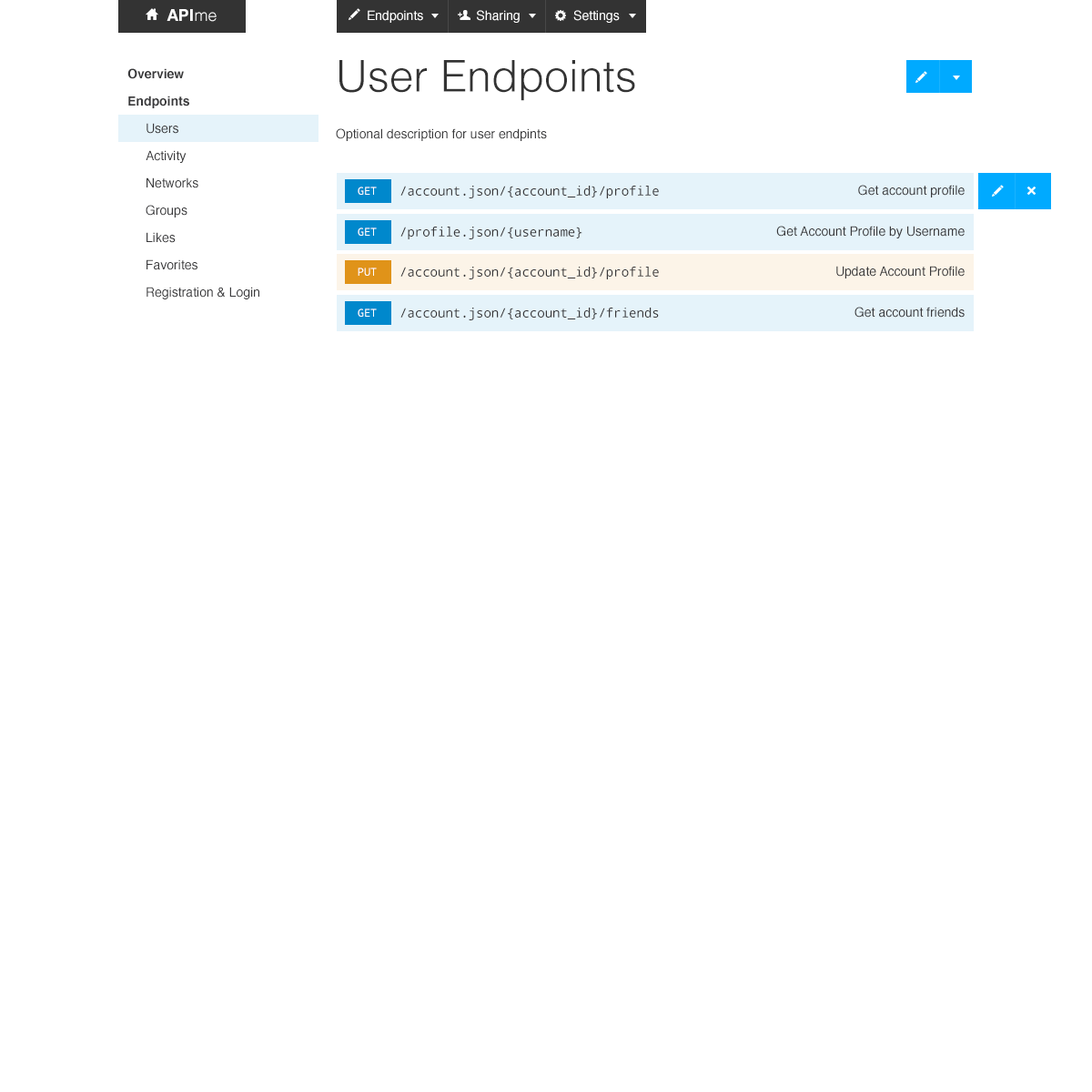
<style>
.page{position:relative;width:1092px;height:1092px;background:#ffffff}
.page>*{position:absolute;margin:0}
.t1{font:16.4px "Helvetica-Bold";color:#ffffff}
.t2{font:16.4px "Helvetica-Light";color:#ffffff}
.t3{font:12.7px "Helvetica";color:#ffffff}
.t4{font:43.7px "Helvetica-Light";color:#333333}
.t5{font:12.7px/27.3px "Helvetica-Bold";color:#3a3a3c}
.t6{font:12.7px/27.3px "Helvetica";color:#3a3a3c}
.t7{font:12.7px "Helvetica";color:#3a3a3c}
.t8{font:12.7px "DroidSansMono";color:#3a3a3c}
.t9{font:10.9px "DroidSansMono";color:#ffffff}
</style>
<div class="page">
<p class="t1" style="left:167px;top:9px;width:50px;height:13px">API<span class="t2">me</span></p>
<p class="t3" style="left:368px;top:10px;width:252px;height:13px">Endpoints               Sharing               Settings</p>
<p class="t4" style="left:339px;top:60px;width:296px;height:41px">User Endpoints</p>
<p class="t5" style="left:127px;top:68px;width:62px;height:40px">Overview<br>Endpoints</p>
<p class="t6" style="left:146px;top:123px;width:113px;height:176px">Users<br>Activity<br>Networks<br>Groups<br>Likes<br>Favorites<br>Registration &amp; Login</p>
<p class="t7" style="left:336px;top:128px;width:211px;height:13px">Optional description for user endpints</p>
<p class="t8" style="left:400px;top:186px;width:259px;height:12px">/account.json/{account_id}/profile</p>
<p class="t7" style="left:858px;top:185px;width:107px;height:12px">Get account profile</p>
<p class="t9" style="left:358px;top:187px;width:19px;height:8px">GET</p>
<p class="t9" style="left:358px;top:227px;width:19px;height:9px">GET</p>
<p class="t8" style="left:400px;top:227px;width:182px;height:12px">/profile.json/{username}</p>
<p class="t7" style="left:776px;top:226px;width:189px;height:12px">Get Account Profile by Username</p>
<p class="t9" style="left:358px;top:268px;width:19px;height:8px">PUT</p>
<p class="t8" style="left:400px;top:267px;width:259px;height:12px">/account.json/{account_id}/profile</p>
<p class="t7" style="left:836px;top:266px;width:129px;height:12px">Update Account Profile</p>
<p class="t9" style="left:358px;top:308px;width:19px;height:9px">GET</p>
<p class="t8" style="left:400px;top:308px;width:259px;height:12px">/account.json/{account_id}/friends</p>
<p class="t7" style="left:854px;top:307px;width:111px;height:11px">Get account friends</p>
</div>
